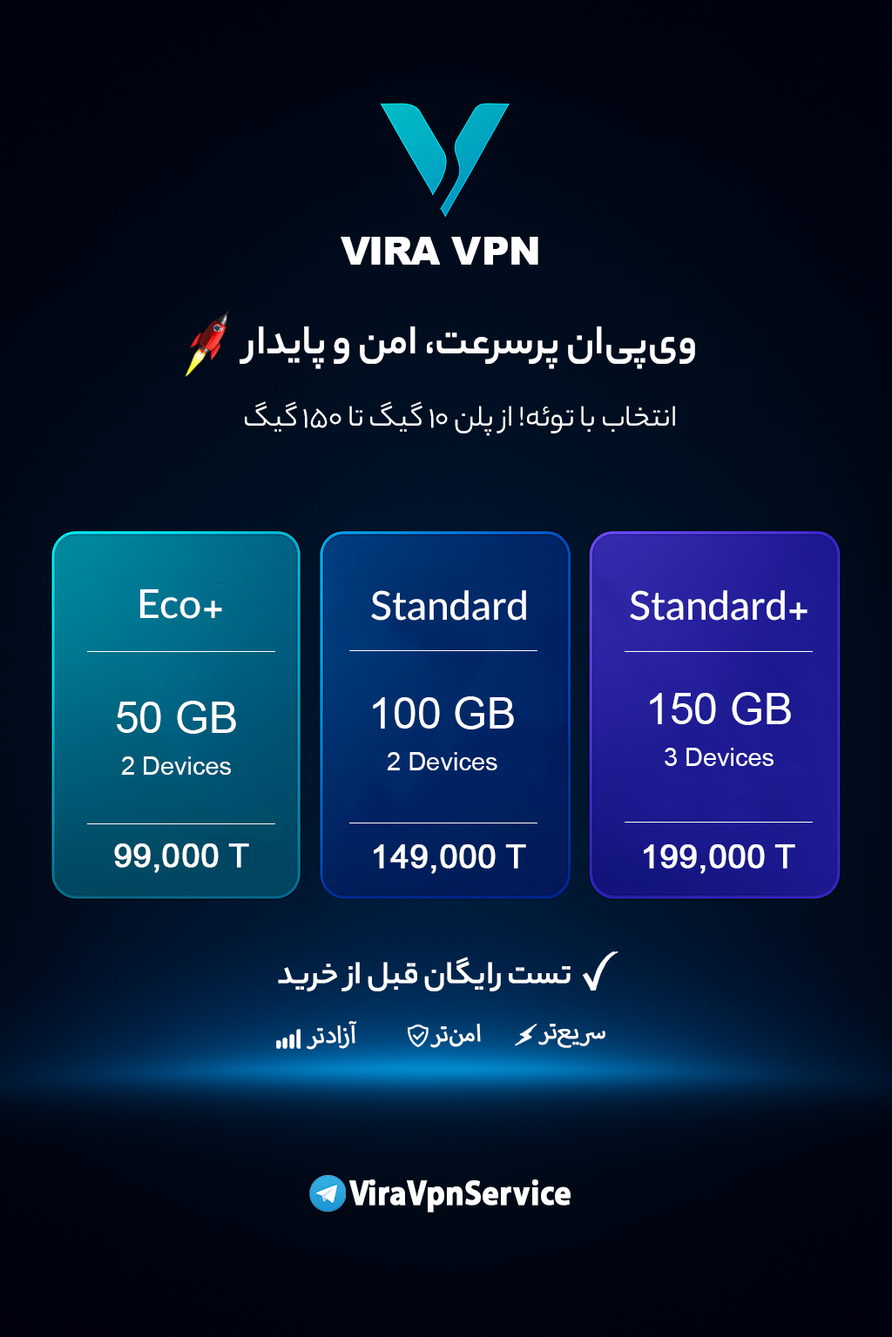
<style>
.page{position:relative;width:892px;height:1337px}
.page>*{position:absolute;margin:0}
.t1{font:38.3px "Arial-Black";letter-spacing:-0.04em;color:#ffffff}
.t2{font:38.3px "Arial-Black";color:#ffffff}
.t3{font:43.5px "YekanBakhFaNum-Bold";color:#ffffff}
.t4{font:31.3px "YekanBakhFaNum-Regular";color:#ffffff}
.t5{font:43.5px "YekanBakhFaNum-Medium";color:#ffffff}
.t6{font:25.3px/41.8px "ArialMT";color:#ffffff}
.t7{font:43.5px "ArialMT";color:#ffffff}
.t8{font:33.1px "ArialMT";color:#ffffff;font-weight:bold}
.t9{font:33.1px "YekanBakhFaNum-Medium";letter-spacing:-0.01em;color:#ffffff;font-weight:bold}
.t10{font:33.1px "MyriadArabic-Regular";letter-spacing:-0.01em;color:#ffffff;font-weight:bold}
.t11{font:50.1px "MyriadArabic-Bold";color:#ffffff;font-weight:bold;scale:0.87 1}
</style>
<div class="page">
<p class="t1" style="left:340px;top:237px;width:198px;height:28px">VIRA<span class="t2"> VPN</span></p>
<p class="t3" style="left:239px;top:327px;width:456px;height:42px">وی‌پی‌ان پرسرعت، امن و پایدار</p>
<p class="t4" style="left:245px;top:401px;width:430px;height:35px">انتخاب با توئه! از پلن 10 گیگ تا 150 گیگ</p>
<p class="t5" style="left:140px;top:589px;width:82px;height:30px">Eco+</p>
<p class="t5" style="left:371px;top:590px;width:155px;height:31px">Standard</p>
<p class="t5" style="left:630px;top:590px;width:177px;height:31px">Standard+</p>
<p class="t6" style="left:117px;top:701px;width:119px;height:74px;text-align:center"><span class="t7">50 GB<br></span>2 Devices</p>
<p class="t6" style="left:373px;top:697px;width:141px;height:74px;text-align:center"><span class="t7">100 GB<br></span>2 Devices</p>
<p class="t6" style="left:650px;top:692px;width:141px;height:74px;text-align:center"><span class="t7">150 GB<br></span>3 Devices</p>
<p class="t8" style="left:114px;top:844px;width:135px;height:29px">99,000 T</p>
<p class="t8" style="left:374px;top:845px;width:152px;height:29px">149,000 T</p>
<p class="t8" style="left:643px;top:845px;width:152px;height:29px">199,000 T</p>
<p class="t9" style="left:278px;top:957px;width:292px;height:35px">تست رایگان قبل از خرید</p>
<p class="t10" style="left:306px;top:1021px;width:51px;height:29px">آزادتر</p>
<p class="t10" style="left:430px;top:1024px;width:51px;height:24px">امن‌تر</p>
<p class="t10" style="left:538px;top:1024px;width:67px;height:24px">سریع‌تر</p>
<p class="t11" style="left:349px;top:1180px;width:221px;height:33px">ViraVpnService</p>
</div>
